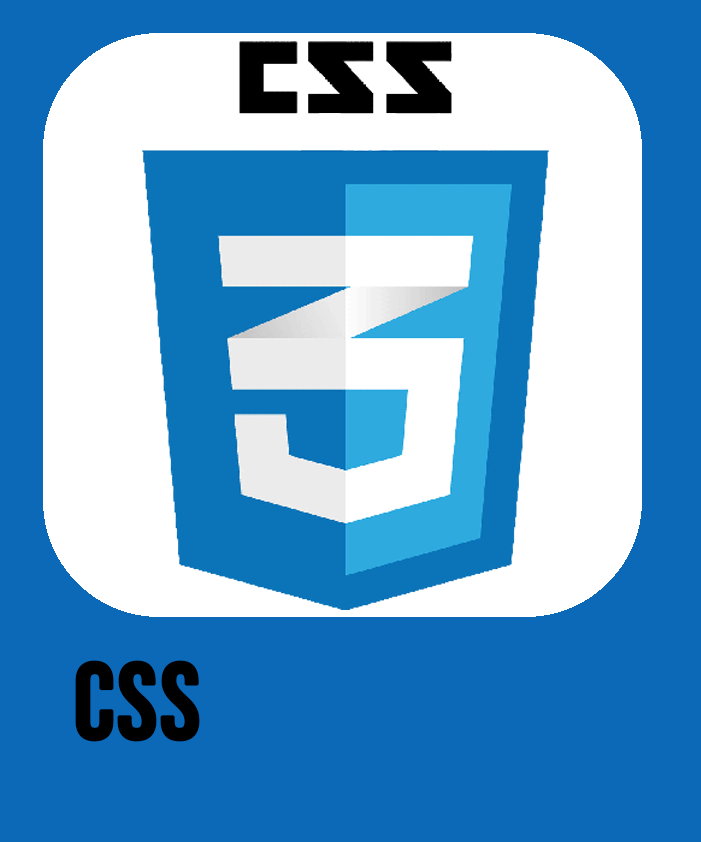
<style>
.page{position:relative;width:701px;height:842px;background:#0b69b8}
.page>*{position:absolute;margin:0}
.t1{font:108px "BebasNeue-Regular";color:#000000;font-weight:bold}
</style>
<div class="page">
<p class="t1" style="left:75px;top:660px;width:125px;height:82px">css</p>
</div>
